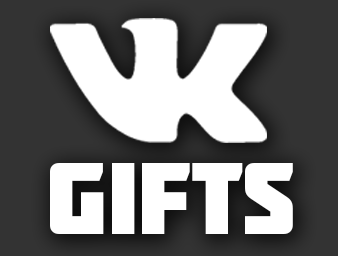
<style>
.page{position:relative;width:338px;height:256px;background:#ffffff}
.page>*{position:absolute;margin:0}
.t1{font:101.9px "Molot";color:#ffffff}
</style>
<div class="page">
<p class="t1" style="left:50px;top:163px;width:243px;height:71px">GIFTS</p>
</div>
